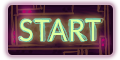
<style>
.page{position:relative;width:120px;height:60px}
.page>*{position:absolute;margin:0}
.t1{font:30.1px "Lato-Regular";letter-spacing:0.025em;color:#f4ffa8;text-transform:uppercase;scale:0.9 1}
</style>
<div class="page">
<p class="t1" style="left:20px;top:19px;width:81px;height:23px">START</p>
</div>
